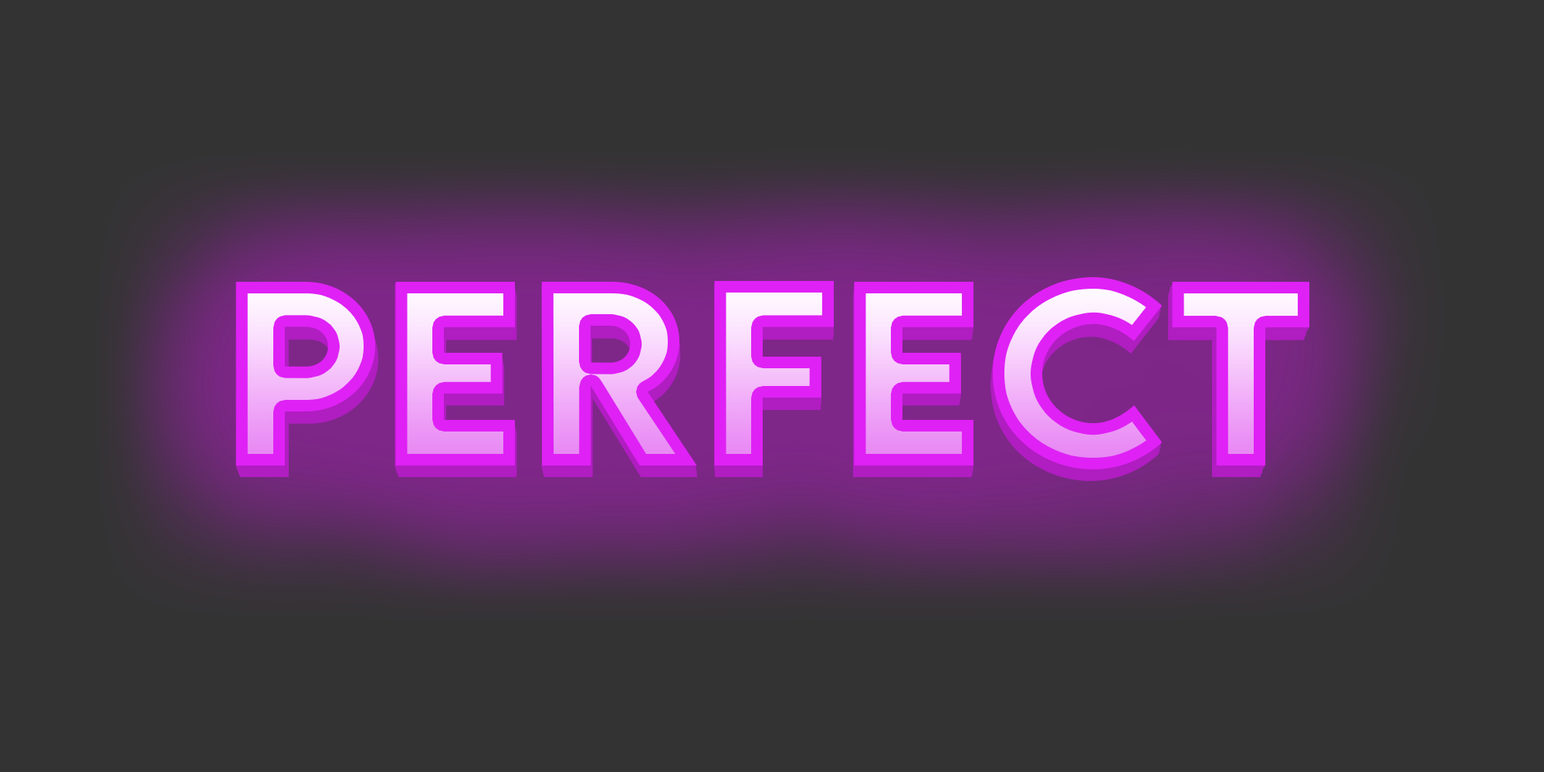
<style>
.page{position:relative;width:1544px;height:772px;background:#333333}
.page>*{position:absolute;margin:0}
.t1{font:233.5px "LEMONMILK-Bold"}
.t2{font:233.6px "LEMONMILK-Bold"}
.t3{font:233.1px "LEMONMILK-Bold"}
.t4{font:232.8px "LEMONMILK-Bold"}
.t5{font:232.2px "LEMONMILK-Bold"}
.t6{font:232.5px "LEMONMILK-Bold"}
.t7{font:231.8px "LEMONMILK-Bold"}
.t8{font:231.6px "LEMONMILK-Bold"}
</style>
<div class="page">
<p class="t1" style="left:236px;top:280px;width:1073px;height:192px">Perfect</p>
<p class="t2" style="left:236px;top:277px;width:1074px;height:192px">Perfect</p>
<p class="t3" style="left:237px;top:283px;width:1070px;height:192px">Perfect</p>
<p class="t4" style="left:238px;top:284px;width:1068px;height:192px">Perfect</p>
<p class="t5" style="left:239px;top:288px;width:1067px;height:191px">Perfect</p>
<p class="t6" style="left:239px;top:285px;width:1067px;height:192px">Perfect</p>
<p class="t7" style="left:239px;top:290px;width:1066px;height:190px">Perfect</p>
<p class="t8" style="left:240px;top:290px;width:1065px;height:191px">Perfect</p>
</div>
